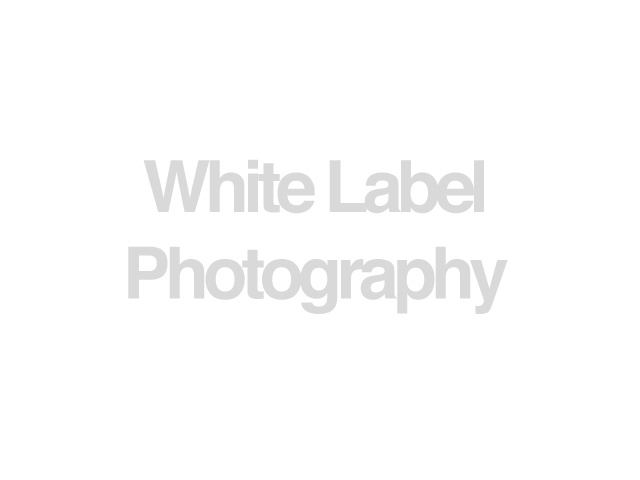
<style>
.page{position:relative;width:640px;height:480px;background:#ffffff}
.page>*{position:absolute;margin:0}
.t1{font:72px "Helvetica-Bold";letter-spacing:-0.08em;color:#d9d9d9}
</style>
<div class="page">
<p class="t1" style="left:128px;top:159px;width:380px;height:155px;text-align:center">White Label<br>Photography</p>
</div>
